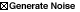
<style>
.page{position:relative;width:80px;height:12px;background:#ffffff}
.page>*{position:absolute;margin:0}
.t1{font:9px "Helvetica-Bold";color:#000000}
</style>
<div class="page">
<p class="t1" style="left:9px;top:2px;width:66px;height:7px">Generate Noise</p>
</div>
